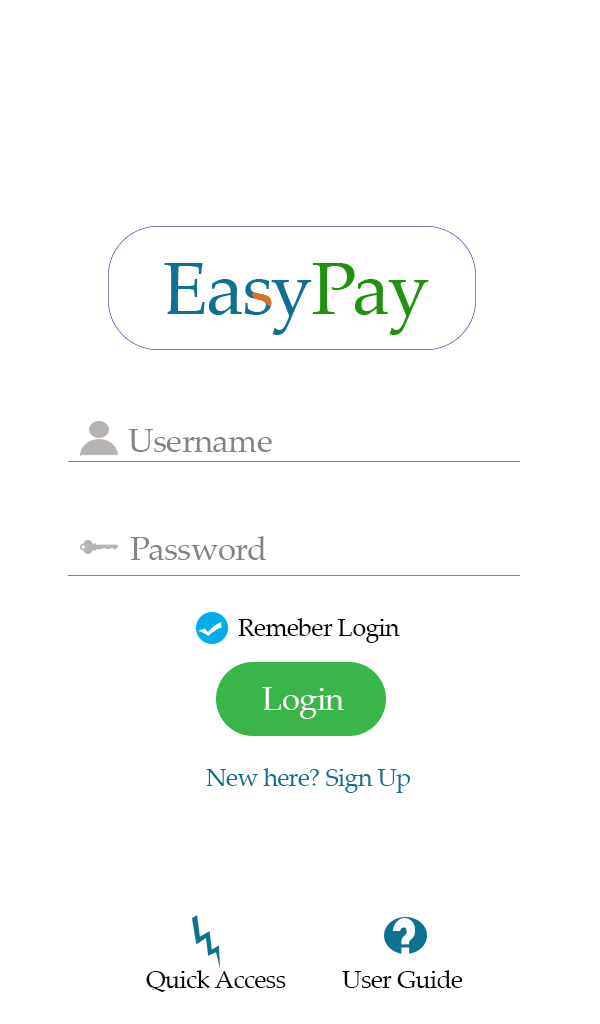
<style>
.page{position:relative;width:600px;height:1024px;background:#ffffff}
.page>*{position:absolute;margin:0}
.t1{font:33.3px "PalatinoLinotype-Roman";letter-spacing:-0.025em;color:#848483}
.t2{font:25px "PalatinoLinotype-Roman";letter-spacing:-0.025em;color:#080605}
.t3{font:33.3px "PalatinoLinotype-Roman";letter-spacing:-0.025em;color:#fffefd}
.t4{font:25px "PalatinoLinotype-Roman";letter-spacing:-0.025em;color:#107090}
</style>
<div class="page">
<p class="t1" style="left:128px;top:429px;width:144px;height:23px">Username</p>
<p class="t1" style="left:130px;top:536px;width:136px;height:24px">Password</p>
<p class="t2" style="left:238px;top:618px;width:162px;height:25px">Remeber Login</p>
<p class="t3" style="left:262px;top:687px;width:82px;height:32px">Login</p>
<p class="t4" style="left:206px;top:768px;width:204px;height:25px">New here? Sign Up</p>
<p class="t2" style="left:146px;top:970px;width:140px;height:22px">Quick Access</p>
<p class="t2" style="left:342px;top:970px;width:121px;height:18px">User Guide</p>
</div>
